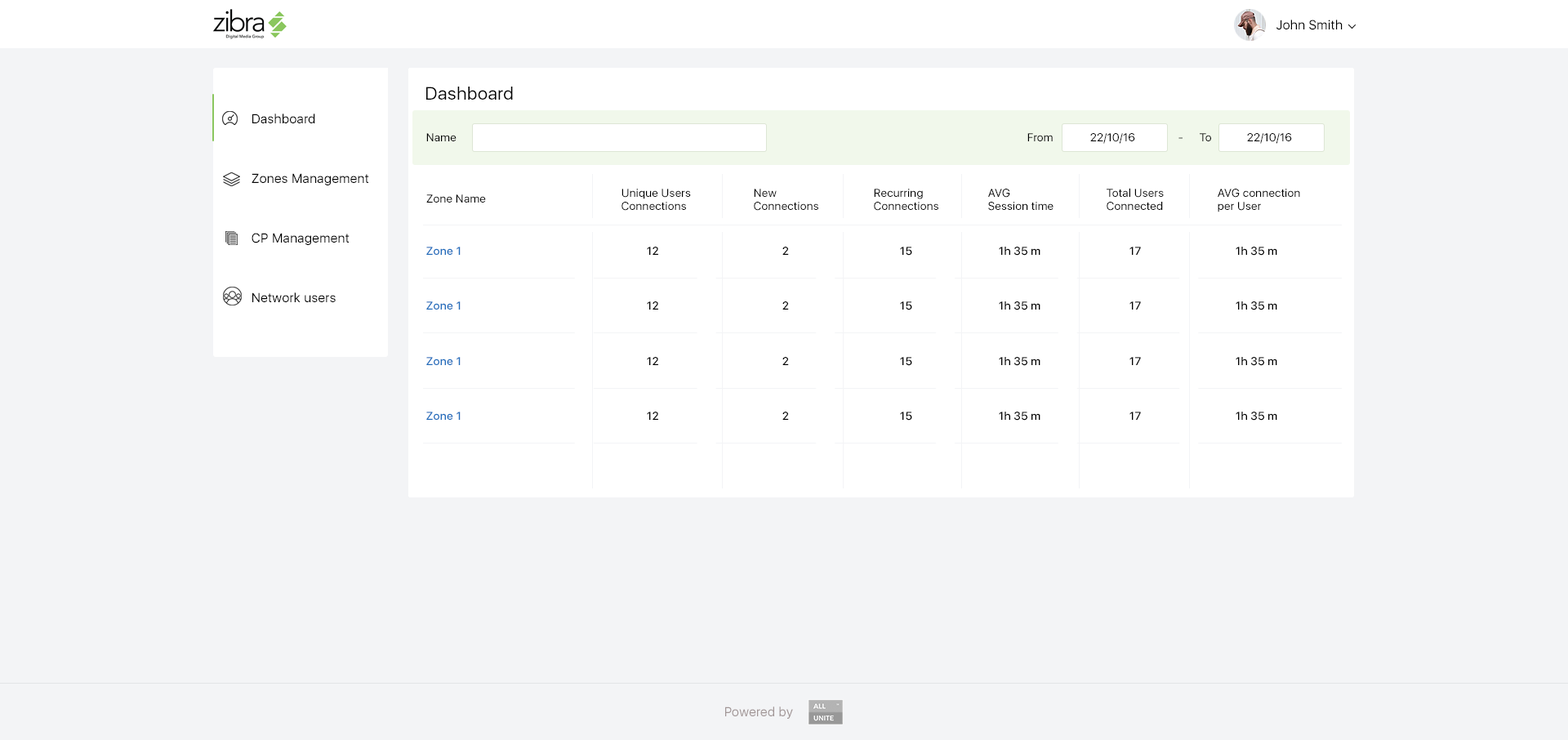
<style>
.page{position:relative;width:1568px;height:740px;background:#f3f4f6}
.page>*{position:absolute;margin:0}
.t1{font:13.1px "SFUIDisplay-Regular";letter-spacing:0.02em;color:#000000}
.t2{font:18px "SFUIDisplay-Regular";letter-spacing:0.02em;color:#000000}
.t3{font:13.1px/59.6px "SFUIDisplay-Regular";letter-spacing:0.02em;color:#000000}
.t4{font:11.4px "SFUIDisplay-Regular";letter-spacing:0.02em;color:#000000}
.t5{font:11.4px "SFUIDisplay-Regular";letter-spacing:0.02em}
.t6{font:11.4px/13.1px "SFUIDisplay-Regular";letter-spacing:0.02em;color:#000000}
.t7{font:11.4px "SFUIDisplay-Medium";letter-spacing:0.02em;color:#206dbc}
.t8{font:11.4px "SFUIDisplay-Medium";letter-spacing:0.02em;color:#000000}
.t9{font:13.1px "SFUIDisplay-Regular";letter-spacing:0.02em;color:#a19696}
</style>
<div class="page">
<p class="t1" style="left:1276px;top:20px;width:67px;height:10px">John Smith</p>
<p class="t2" style="left:426px;top:87px;width:87px;height:13px">Dashboard</p>
<p class="t3" style="left:252px;top:114px;width:117px;height:188px;text-align:right">Dashboard<br>Zones Management<br>CP Management<br>Network users</p>
<p class="t4" style="left:426px;top:133px;width:31px;height:8px">Name</p>
<p class="t4" style="left:1027px;top:133px;width:26px;height:8px">From</p>
<p class="t4" style="left:1090px;top:133px;width:45px;height:11px">22/10/16</p>
<p class="t5" style="left:1178px;top:137px;width:5px;height:2px">-</p>
<p class="t4" style="left:1200px;top:133px;width:11px;height:8px">To</p>
<p class="t4" style="left:1247px;top:133px;width:45px;height:11px">22/10/16</p>
<p class="t4" style="left:426px;top:194px;width:60px;height:9px">Zone Name</p>
<p class="t6" style="left:621px;top:189px;width:70px;height:22px;text-align:right">Unique Users<br>Connections</p>
<p class="t6" style="left:754px;top:189px;width:64px;height:22px;text-align:right">New<br>Connections</p>
<p class="t6" style="left:874px;top:189px;width:64px;height:22px;text-align:right">Recurring<br>Connections</p>
<p class="t6" style="left:988px;top:189px;width:66px;height:22px;text-align:right">AVG<br>Session time</p>
<p class="t6" style="left:1107px;top:188px;width:57px;height:23px;text-align:right">Total Users<br>Connected</p>
<p class="t6" style="left:1218px;top:189px;width:82px;height:23px;text-align:right">AVG connection<br>per User</p>
<p class="t7" style="left:426px;top:247px;width:35px;height:8px">Zone 1</p>
<p class="t8" style="left:647px;top:247px;width:11px;height:8px">12</p>
<p class="t8" style="left:782px;top:247px;width:7px;height:8px">2</p>
<p class="t8" style="left:900px;top:247px;width:12px;height:9px">15</p>
<p class="t8" style="left:999px;top:247px;width:41px;height:9px">1h 35 m</p>
<p class="t8" style="left:1129px;top:247px;width:12px;height:8px">17</p>
<p class="t8" style="left:1236px;top:247px;width:41px;height:9px">1h 35 m</p>
<p class="t7" style="left:426px;top:301px;width:35px;height:9px">Zone 1</p>
<p class="t8" style="left:647px;top:301px;width:11px;height:9px">12</p>
<p class="t8" style="left:782px;top:301px;width:7px;height:9px">2</p>
<p class="t8" style="left:900px;top:301px;width:12px;height:9px">15</p>
<p class="t8" style="left:999px;top:301px;width:41px;height:9px">1h 35 m</p>
<p class="t8" style="left:1129px;top:301px;width:12px;height:9px">17</p>
<p class="t8" style="left:1236px;top:301px;width:41px;height:9px">1h 35 m</p>
<p class="t7" style="left:426px;top:357px;width:35px;height:8px">Zone 1</p>
<p class="t8" style="left:647px;top:357px;width:11px;height:8px">12</p>
<p class="t8" style="left:782px;top:357px;width:7px;height:8px">2</p>
<p class="t8" style="left:900px;top:357px;width:12px;height:9px">15</p>
<p class="t8" style="left:999px;top:357px;width:41px;height:9px">1h 35 m</p>
<p class="t8" style="left:1129px;top:357px;width:12px;height:8px">17</p>
<p class="t8" style="left:1236px;top:357px;width:41px;height:9px">1h 35 m</p>
<p class="t7" style="left:426px;top:412px;width:35px;height:8px">Zone 1</p>
<p class="t8" style="left:647px;top:412px;width:11px;height:8px">12</p>
<p class="t8" style="left:782px;top:412px;width:7px;height:8px">2</p>
<p class="t8" style="left:900px;top:412px;width:12px;height:9px">15</p>
<p class="t8" style="left:999px;top:412px;width:41px;height:9px">1h 35 m</p>
<p class="t8" style="left:1129px;top:412px;width:12px;height:8px">17</p>
<p class="t8" style="left:1236px;top:412px;width:41px;height:9px">1h 35 m</p>
<p class="t9" style="left:725px;top:706px;width:68px;height:13px">Powered by</p>
</div>
